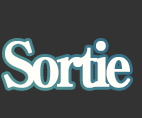
<style>
.page{position:relative;width:142px;height:118px;background:#333333}
.page>*{position:absolute;margin:0}
.t1{font:60px "RyuminPro-ExBold";letter-spacing:-0.12em;color:#fffef9;font-weight:bold;scale:0.9 1}
</style>
<div class="page">
<p class="t1" style="left:4px;top:41px;width:127px;height:47px">Sortie</p>
</div>
